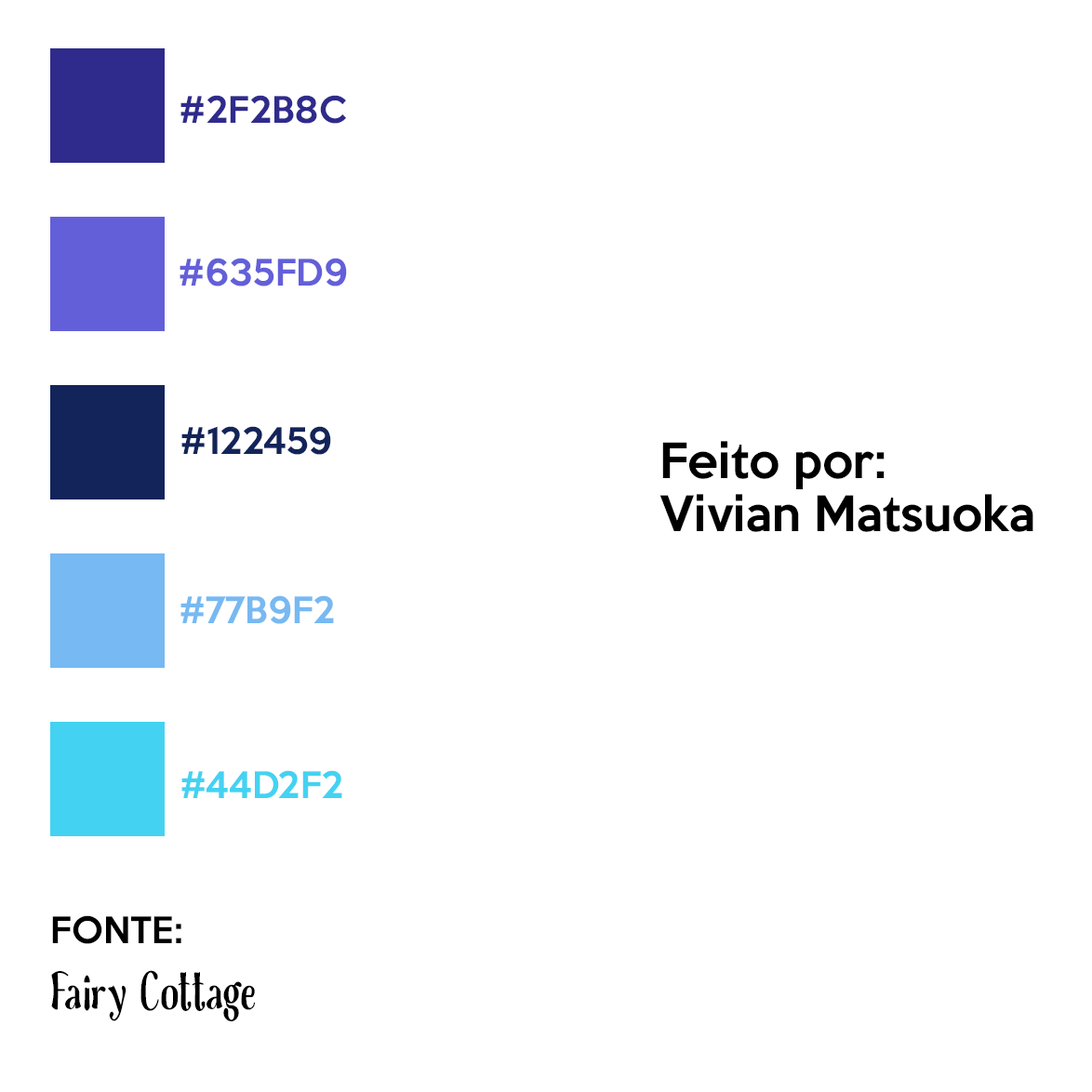
<style>
.page{position:relative;width:1092px;height:1092px;background:#ffffff}
.page>*{position:absolute;margin:0}
.t1{font:33.5px "KeepCalm-Medium";color:#2f2b8c}
.t2{font:33.5px "KeepCalm-Medium";color:#635fd9}
.t3{font:33.5px "KeepCalm-Medium";color:#122459}
.t4{font:44.6px "KeepCalm-Medium";color:#000000}
.t5{font:33.5px "KeepCalm-Medium";color:#77b9f2}
.t6{font:33.5px "KeepCalm-Medium";color:#44d2f2}
.t7{font:55.8px "FairyCottage-Regular";color:#000000}
.t8{font:33.5px "KeepCalm-Medium";color:#000000}
</style>
<div class="page">
<p class="t1" style="left:180px;top:95px;width:166px;height:29px">#2F2B8C</p>
<p class="t2" style="left:180px;top:258px;width:167px;height:28px">#635FD9</p>
<p class="t3" style="left:181px;top:426px;width:150px;height:29px">#122459</p>
<p class="t4" style="left:659px;top:441px;width:374px;height:91px">Feito por:<br>Vivian Matsuoka</p>
<p class="t5" style="left:180px;top:595px;width:154px;height:29px">#77B9F2</p>
<p class="t6" style="left:181px;top:770px;width:161px;height:28px">#44D2F2</p>
<p class="t7" style="left:51px;top:915px;width:204px;height:106px"><span class="t8">FONTE:<br></span>Fairy Cottage</p>
</div>
